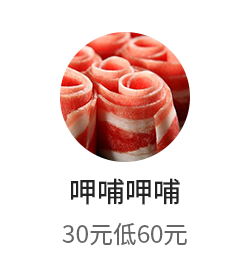
<style>
.page{position:relative;width:250px;height:272px;background:#ffffff}
.page>*{position:absolute;margin:0}
.t1{font:28px "SourceHanSansCN-Medium";color:#222222}
.t2{font:24px "SourceHanSansCN-Regular";color:#666666}
</style>
<div class="page">
<p class="t1" style="left:71px;top:178px;width:109px;height:27px">呷哺呷哺</p>
<p class="t2" style="left:62px;top:223px;width:125px;height:23px">30元低60元</p>
</div>
